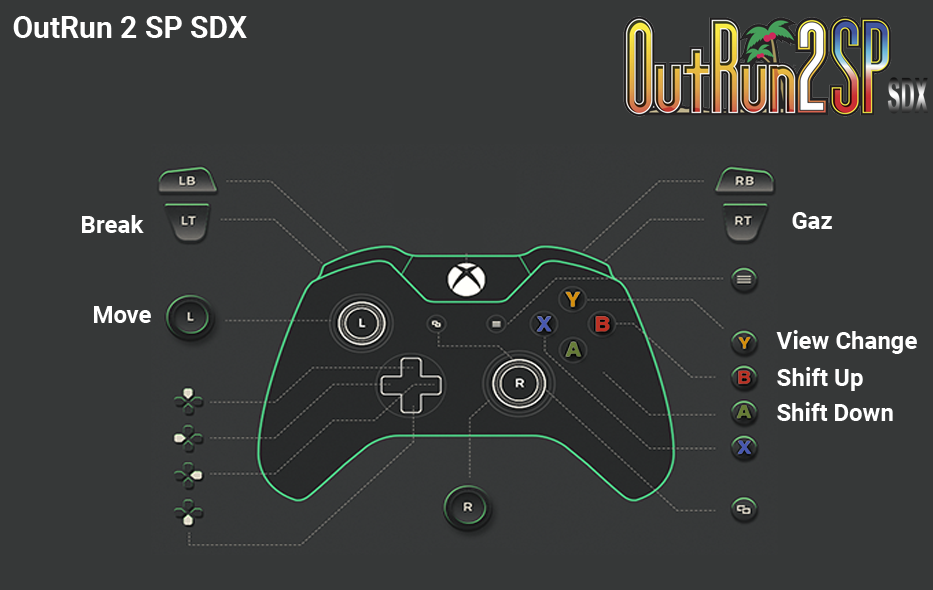
<style>
.page{position:relative;width:933px;height:590px;background:#363838}
.page>*{position:absolute;margin:0}
.t1{font:30px "Roboto-Bold";color:#ffffff}
.t2{font:24px "Roboto-Bold";color:#ffffff}
</style>
<div class="page">
<p class="t1" style="left:13px;top:16px;width:234px;height:22px">OutRun 2 SP SDX</p>
<p class="t2" style="left:82px;top:215px;width:62px;height:18px">Break</p>
<p class="t2" style="left:792px;top:212px;width:40px;height:17px">Gaz</p>
<p class="t2" style="left:94px;top:306px;width:57px;height:17px">Move</p>
<p class="t2" style="left:776px;top:330px;width:141px;height:24px">View Change</p>
<p class="t2" style="left:777px;top:367px;width:86px;height:24px">Shift Up</p>
<p class="t2" style="left:777px;top:402px;width:116px;height:19px">Shift Down</p>
</div>
